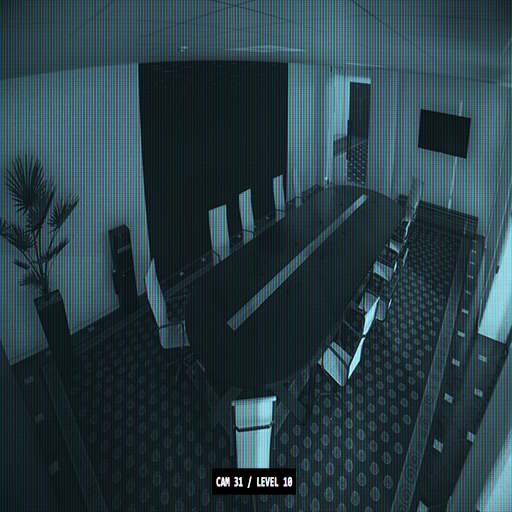
<style>
.page{position:relative;width:512px;height:512px}
.page>*{position:absolute;margin:0}
.t1{font:13.7px "Consolas-Bold";color:#ffffff;font-weight:bold;scale:0.56 1}
</style>
<div class="page">
<p class="t1" style="left:216px;top:476px;width:77px;height:12px">CAM 31 / LEVEL 10</p>
</div>
